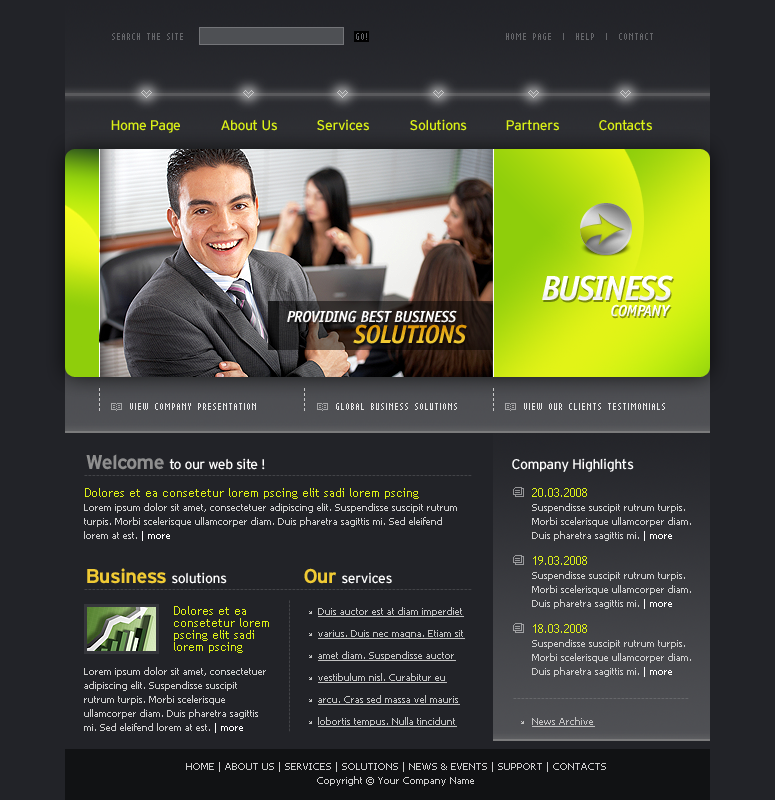
<style>
.page{position:relative;width:775px;height:800px;background:#222328}
.page>*{position:absolute;margin:0}
.t1{font:10px "AuXDotBitCCond";color:#65666a}
.t2{font:14px "Interstate-Regular";letter-spacing:-0.04em;color:#daf017}
.t3{font:35px "OfficinaSansStd-BoldItalic";letter-spacing:-0.04em;color:#fcfcfc;text-transform:uppercase}
.t4{font:16px "OfficinaSansStd-BoldItalic";letter-spacing:-0.04em;color:#fdfdfd;text-transform:uppercase}
.t5{font:26px "OfficinaSansStd-BoldItalic";letter-spacing:-0.04em;text-transform:uppercase}
.t6{font:10px "AuXDotBitCCond";color:#c9c9ca}
.t7{font:10px "AuXDotBitCCond";color:#e8e8e8}
.t8{font:14px "Interstate-Regular";letter-spacing:-0.04em;color:#ffffff}
.t9{font:20px "Interstate-Bold";letter-spacing:-0.04em;color:#8e8e8e}
.t10{font:10px "Tahoma"}
.t11{font:10px/14px "Tahoma";color:#cecece}
.t12{font:12px/12px "TrebuchetMS";color:#def117}
.t13{font:10px/14px "Tahoma";color:#ffffff}
.t14{font:20px "Interstate-Bold";letter-spacing:-0.04em;color:#f0ca34}
.t15{font:10px/22px "Tahoma";color:#c2c2c2;text-decoration:underline}
.t16{font:10px "Tahoma";color:#c2c2c2;text-decoration:underline}
</style>
<div class="page">
<p class="t1" style="left:112px;top:33px;width:71px;height:7px">SEARCH THE SITE</p>
<p class="t1" style="left:356px;top:33px;width:11px;height:7px">GO!</p>
<p class="t1" style="left:506px;top:33px;width:147px;height:7px">HOME PAGE  |  HELP  |  CONTACT</p>
<p class="t2" style="left:111px;top:120px;width:69px;height:13px">Home Page</p>
<p class="t2" style="left:221px;top:119px;width:56px;height:12px">About Us</p>
<p class="t2" style="left:317px;top:119px;width:52px;height:12px">Services</p>
<p class="t2" style="left:410px;top:119px;width:57px;height:12px">Solutions</p>
<p class="t2" style="left:506px;top:119px;width:53px;height:12px">Partners</p>
<p class="t2" style="left:599px;top:119px;width:53px;height:12px">Contacts</p>
<p class="t3" style="left:542px;top:275px;width:131px;height:26px">BUSINESS</p>
<p class="t4" style="left:611px;top:304px;width:60px;height:13px">company</p>
<p class="t4" style="left:287px;top:310px;width:170px;height:13px">PROVIDING BEST BUSINESS</p>
<p class="t5" style="left:353px;top:324px;width:114px;height:20px">sOLUTIONS</p>
<p class="t6" style="left:99px;top:388px;width:1px;height:23px;rotate:90deg">-----</p>
<p class="t6" style="left:304px;top:388px;width:1px;height:23px;rotate:90deg">-----</p>
<p class="t6" style="left:493px;top:388px;width:1px;height:23px;rotate:90deg">-----</p>
<p class="t7" style="left:130px;top:403px;width:126px;height:7px">VIEW COMPANY PRESENTATION</p>
<p class="t7" style="left:336px;top:403px;width:121px;height:7px">GLOBAL BUSINESS SOLUTIONS</p>
<p class="t7" style="left:524px;top:403px;width:141px;height:7px">VIEW OUR CLIENTS TESTIMONIALS</p>
<p class="t8" style="left:86px;top:454px;width:179px;height:16px"><span class="t9">Welcome </span>to our web site !</p>
<p class="t8" style="left:512px;top:458px;width:122px;height:14px">Company Highlights</p>
<p class="t10" style="left:84px;top:475px;width:388px;height:1px">-------------------------------------------------------------------------------------------------</p>
<p class="t11" style="left:84px;top:488px;width:373px;height:53px"><span class="t12">Dolores et ea consetetur lorem pscing elit sadi lorem pscing <br></span>Lorem ipsum dolor sit amet, consectetuer adipiscing elit. Suspendisse suscipit rutrum turpis. Morbi scelerisque ullamcorper diam. Duis pharetra sagittis mi. Sed eleifend lorem at est. <span class="t13">| more</span></p>
<p class="t11" style="left:532px;top:488px;width:159px;height:189px"><span class="t12">20.03.2008<br></span>Suspendisse suscipit rutrum turpis. Morbi scelerisque ullamcorper diam. Duis pharetra sagittis mi. <span class="t13">| more<br><br></span><span class="t12">19.03.2008<br></span>Suspendisse suscipit rutrum turpis. Morbi scelerisque ullamcorper diam. Duis pharetra sagittis mi. <span class="t13">| more<br><br></span><span class="t12">18.03.2008<br></span>Suspendisse suscipit rutrum turpis. Morbi scelerisque ullamcorper diam. Duis pharetra sagittis mi. <span class="t13">| more</span></p>
<p class="t8" style="left:87px;top:568px;width:140px;height:16px"><span class="t14">Business </span>solutions</p>
<p class="t8" style="left:304px;top:568px;width:88px;height:16px"><span class="t14">Our </span>services</p>
<p class="t10" style="left:84px;top:589px;width:388px;height:1px">-------------------------------------------------------------------------------------------------</p>
<p class="t12" style="left:174px;top:606px;width:95px;height:47px">Dolores et ea consetetur lorem pscing elit sadi lorem pscing</p>
<p class="t10" style="left:289px;top:600px;width:1px;height:132px;rotate:90deg">---------------------------------</p>
<p class="t15" style="left:318px;top:607px;width:147px;height:120px">Duis auctor est at diam imperdiet varius. Duis nec magna. Etiam sit amet diam. Suspendisse auctor vestibulum nisl. Curabitur eu arcu. Cras sed massa vel mauris lobortis tempus. Nulla tincidunt</p>
<p class="t11" style="left:84px;top:667px;width:182px;height:66px">Lorem ipsum dolor sit amet, consectetuer adipiscing elit. Suspendisse suscipit rutrum turpis. Morbi scelerisque ullamcorper diam. Duis pharetra sagittis mi. Sed eleifend lorem at est. <span class="t13">| more</span></p>
<p class="t10" style="left:513px;top:698px;width:176px;height:1px">--------------------------------------------</p>
<p class="t16" style="left:532px;top:717px;width:63px;height:10px">News Archive</p>
<p class="t11" style="left:186px;top:762px;width:420px;height:24px;text-align:center">HOME | ABOUT US | SERVICES | SOLUTIONS | NEWS &amp; EVENTS | SUPPORT | CONTACTS<br>Copyright © Your Company Name</p>
</div>
